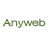
<style>
.page{position:relative;width:50px;height:50px;background:#ffffff}
.page>*{position:absolute;margin:0}
.t1{font:12px "FZSTK--GBK1-0";color:#5c783e}
</style>
<div class="page">
<p class="t1" style="left:2px;top:18px;width:44px;height:10px">Anyweb</p>
</div>
